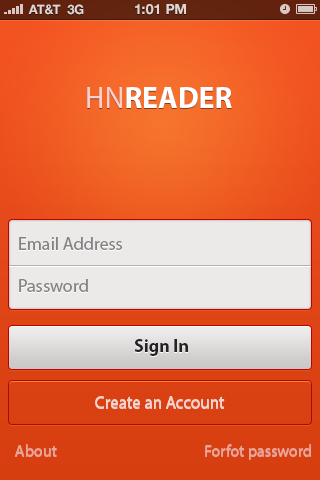
<style>
.page{position:relative;width:320px;height:480px}
.page>*{position:absolute;margin:0}
.t1{font:13px "HelveticaNeue-Bold";color:#ded7d5;text-transform:uppercase}
.t2{font:14px "HelveticaNeue-Bold";color:#ded7d5;text-transform:uppercase}
.t3{font:30px "MyriadPro-Bold";color:#ffffff}
.t4{font:30px "MyriadPro-Regular";color:#ffcfcf}
.t5{font:18px "MyriadPro-Regular";color:#838383}
.t6{font:18px "MyriadPro-Bold";color:#242323}
.t7{font:17px "MyriadPro-Regular";color:#f4d4ce}
.t8{font:16px "MyriadPro-Regular";color:#e9a599}
</style>
<div class="page">
<p class="t1" style="left:28px;top:4px;width:33px;height:11px">AT&amp;T</p>
<p class="t1" style="left:67px;top:4px;width:17px;height:11px">3G</p>
<p class="t2" style="left:135px;top:4px;width:51px;height:11px">1:01 PM</p>
<p class="t3" style="left:87px;top:87px;width:145px;height:21px"><span class="t4">HN</span>READER</p>
<p class="t5" style="left:19px;top:237px;width:103px;height:13px">Email Address</p>
<p class="t5" style="left:19px;top:279px;width:69px;height:13px">Password</p>
<p class="t6" style="left:134px;top:339px;width:54px;height:17px">Sign In</p>
<p class="t7" style="left:95px;top:397px;width:130px;height:12px">Create an Account</p>
<p class="t8" style="left:15px;top:445px;width:42px;height:12px">About</p>
<p class="t8" style="left:205px;top:445px;width:106px;height:15px">Forfot password</p>
</div>
